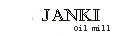
<style>
.page{position:relative;width:131px;height:36px;background:#ffffff}
.page>*{position:absolute;margin:0}
.t1{font:16.7px "Castellar"}
.t2{font:8.3px "Consolas";color:#2d2d28}
</style>
<div class="page">
<p class="t1" style="left:42px;top:9px;width:58px;height:12px">Janki</p>
<p class="t2" style="left:74px;top:25px;width:36px;height:6px">Oil mill</p>
</div>
